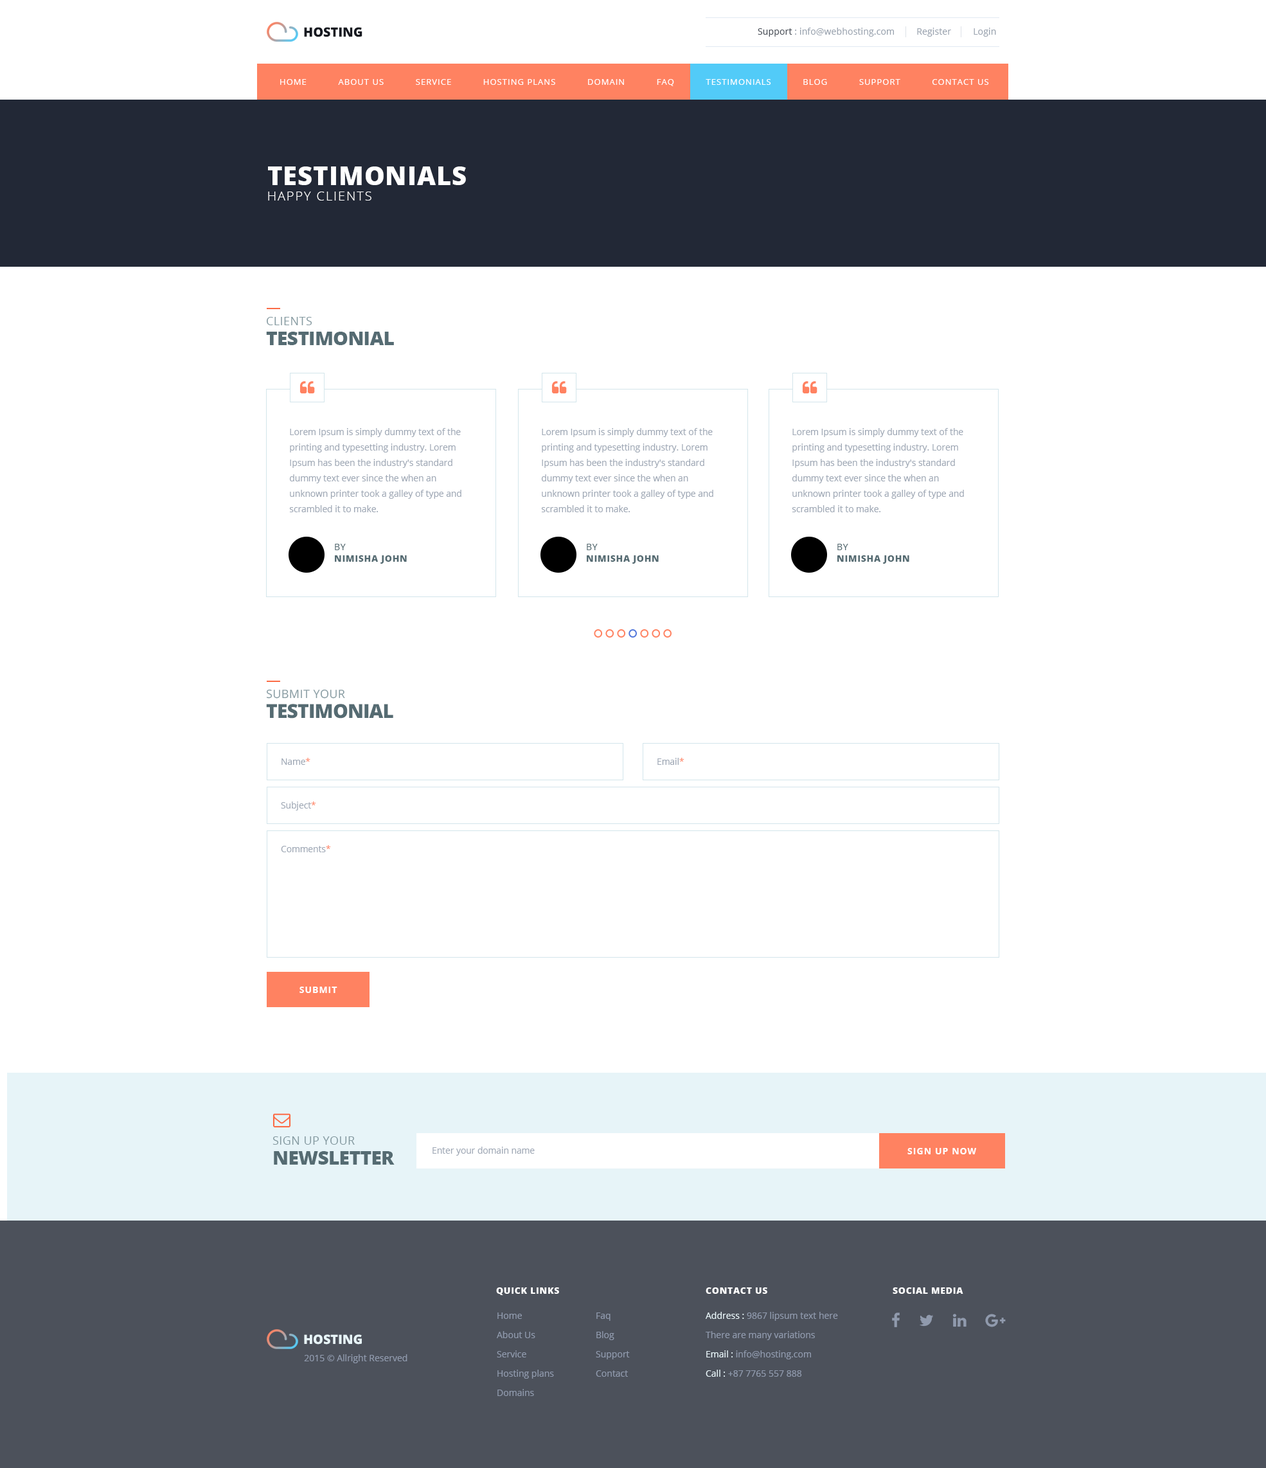
<style>
.page{position:relative;width:1266px;height:1468px;background:#ffffff}
.page>*{position:absolute;margin:0}
.t1{font:12.9px "OpenSans-Extrabold";letter-spacing:-0.005em;color:#161920;text-transform:uppercase}
.t2{font:9px "OpenSans";letter-spacing:0.01em;color:#9ba4b0}
.t3{font:9px "OpenSans";letter-spacing:0.01em;color:#484e57}
.t4{font:8.4px "OpenSans";letter-spacing:0.08em;color:#ffffff;text-transform:uppercase}
.t5{font:12.9px "OpenSans-Light";letter-spacing:0.095em;color:#ffffff;text-transform:uppercase}
.t6{font:25.7px "OpenSans-Extrabold";letter-spacing:0.025em;color:#ffffff;text-transform:uppercase}
.t7{font:19.3px/19.9px "OpenSans-Extrabold";letter-spacing:-0.025em;color:#556b72;text-transform:uppercase}
.t8{font:11.6px/19.9px "OpenSans";letter-spacing:0.025em;color:#859aa1;text-transform:uppercase}
.t9{font:8.7px/15.4px "OpenSans";letter-spacing:0.01em;color:#a0a9b6}
.t10{font:9px/11.6px "OpenSans-Extrabold";letter-spacing:0.05em;color:#556b72;text-transform:uppercase}
.t11{font:9px/11.6px "OpenSans";letter-spacing:0.05em;color:#556b72;text-transform:uppercase}
.t12{font:8.7px "OpenSans";letter-spacing:0.01em;color:#a0a9b6}
.t13{font:8.7px "OpenSans";letter-spacing:0.01em;color:#ff8261}
.t14{font:8.7px "OpenSans-Bold";letter-spacing:0.1em;color:#ffffff;text-transform:uppercase}
.t15{font:9px "OpenSans-Extrabold";letter-spacing:0.05em;color:#ffffff;text-transform:uppercase}
.t16{font:9px/19.3px "OpenSans";color:#909aad}
.t17{font:9px/19.3px "OpenSans";color:#e7f4f8}
.t18{font:12.9px "OpenSans-Extrabold";letter-spacing:-0.005em;color:#e7f4f8;text-transform:uppercase}
.t19{font:9px "OpenSans";color:#909aad}
</style>
<div class="page">
<p class="t1" style="left:304px;top:27px;width:59px;height:10px">Hosting</p>
<p class="t2" style="left:758px;top:28px;width:238px;height:9px"><span class="t3">Support </span>: info@webhosting.com         Register         Login</p>
<p class="t4" style="left:280px;top:79px;width:709px;height:7px">Home           About us           Service           Hosting Plans           Domain           Faq           Testimonials           Blog           Support           Contact Us</p>
<p class="t5" style="left:268px;top:166px;width:198px;height:35px"><span class="t6">testimonials<br></span>happy clients</p>
<p class="t7" style="left:266px;top:317px;width:128px;height:28px"><span class="t8">clients<br></span>Testimonial</p>
<p class="t9" style="left:289px;top:428px;width:173px;height:84px">Lorem Ipsum is simply dummy text of the printing and typesetting industry. Lorem Ipsum has been the industry's standard dummy text ever since the when an unknown printer took a galley of type and scrambled it to make.</p>
<p class="t9" style="left:541px;top:428px;width:173px;height:84px">Lorem Ipsum is simply dummy text of the printing and typesetting industry. Lorem Ipsum has been the industry's standard dummy text ever since the when an unknown printer took a galley of type and scrambled it to make.</p>
<p class="t9" style="left:792px;top:428px;width:172px;height:84px">Lorem Ipsum is simply dummy text of the printing and typesetting industry. Lorem Ipsum has been the industry's standard dummy text ever since the when an unknown printer took a galley of type and scrambled it to make.</p>
<p class="t10" style="left:335px;top:544px;width:72px;height:20px"><span class="t11">By<br></span>nimisha john</p>
<p class="t10" style="left:587px;top:544px;width:72px;height:20px"><span class="t11">By<br></span>nimisha john</p>
<p class="t10" style="left:838px;top:544px;width:72px;height:20px"><span class="t11">By<br></span>nimisha john</p>
<p class="t8" style="left:266px;top:689px;width:127px;height:30px">Submit your<br><span class="t7">testimonial</span></p>
<p class="t12" style="left:282px;top:758px;width:28px;height:7px">Name<span class="t13">*</span></p>
<p class="t12" style="left:658px;top:758px;width:27px;height:7px">Email<span class="t13">*</span></p>
<p class="t12" style="left:281px;top:802px;width:35px;height:9px">Subject<span class="t13">*</span></p>
<p class="t12" style="left:281px;top:845px;width:50px;height:7px">Comments<span class="t13">*</span></p>
<p class="t14" style="left:300px;top:987px;width:38px;height:6px">Submit</p>
<p class="t8" style="left:273px;top:1137px;width:122px;height:28px">sign up your <br><span class="t7">newsletter</span></p>
<p class="t12" style="left:433px;top:1147px;width:102px;height:9px">Enter your domain name</p>
<p class="t14" style="left:908px;top:1148px;width:69px;height:7px">Sign up now</p>
<p class="t15" style="left:496px;top:1288px;width:63px;height:7px">Quick links</p>
<p class="t15" style="left:706px;top:1288px;width:62px;height:6px">Contact us</p>
<p class="t15" style="left:893px;top:1288px;width:71px;height:6px">Social media</p>
<p class="t16" style="left:497px;top:1313px;width:57px;height:83px">Home<br>About Us<br>Service<br>Hosting plans<br>Domains</p>
<p class="t16" style="left:596px;top:1313px;width:34px;height:64px">Faq<br>Blog<br>Support<br>Contact</p>
<p class="t16" style="left:706px;top:1312px;width:132px;height:65px"><span class="t17">Address : </span>9867 lipsum text here<br>There are many variations<br><span class="t17">Email : </span>info@hosting.com<br><span class="t17">Call : </span>+87 7765 557 888</p>
<p class="t18" style="left:304px;top:1335px;width:58px;height:10px">Hosting</p>
<p class="t19" style="left:304px;top:1354px;width:104px;height:10px">2015 © Allright Reserved</p>
</div>
